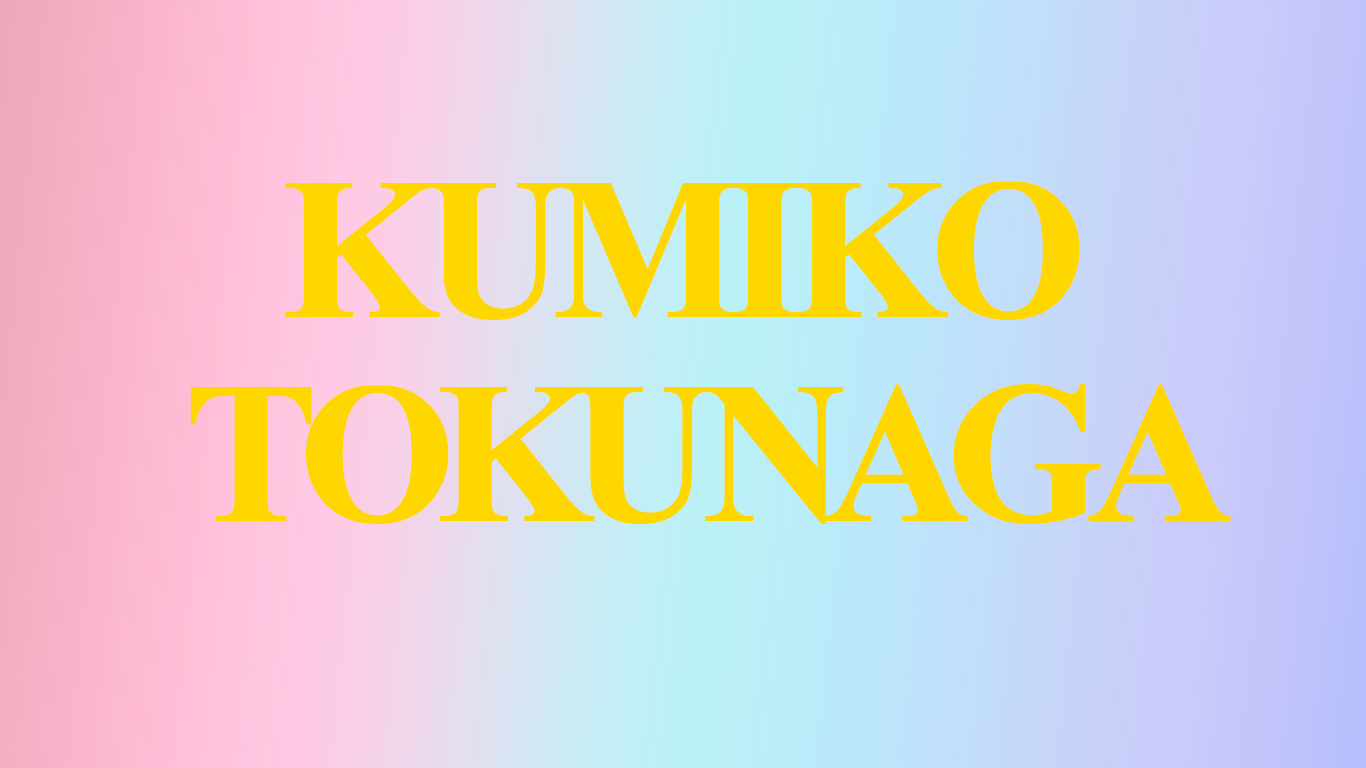
<style>
.page{position:relative;width:1366px;height:768px}
.page>*{position:absolute;margin:0}
.t1{font:200px "TimesNewRomanPS-BoldMT";letter-spacing:-0.1em;color:#ffd700;font-weight:bold}
.t2{font:200px "TimesNewRomanPS-BoldMT";letter-spacing:-0.16em;color:#ffd700;font-weight:bold}
</style>
<div class="page">
<p class="t1" style="left:285px;top:181px;width:795px;height:139px">KUMIKO</p>
<p class="t2" style="left:190px;top:384px;width:1041px;height:140px">TOKUNAGA</p>
</div>
